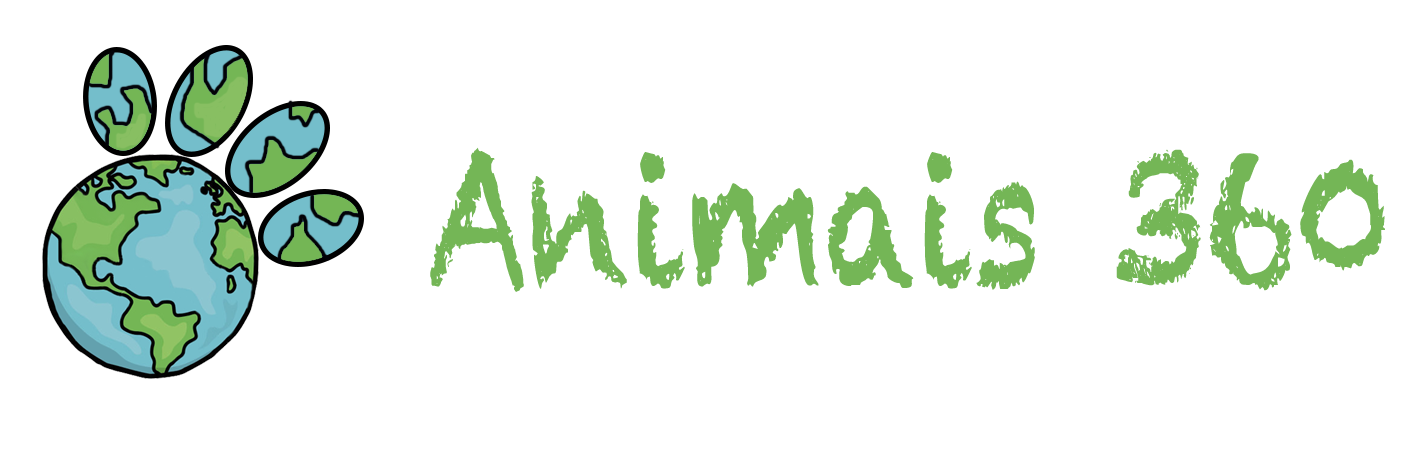
<style>
.page{position:relative;width:1406px;height:451px;background:#ffffff}
.page>*{position:absolute;margin:0}
.t1{font:187.5px "Chalkduster";color:#74b656;scale:0.73 1}
</style>
<div class="page">
<p class="t1" style="left:430px;top:147px;width:955px;height:145px">Animais 360</p>
</div>
